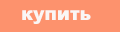
<style>
.page{position:relative;width:120px;height:32px;background:#fd926d}
.page>*{position:absolute;margin:0}
.t1{font:18.7px "Arial-Black";color:#faf6f5}
</style>
<div class="page">
<p class="t1" style="left:22px;top:10px;width:69px;height:14px">купить</p>
</div>
